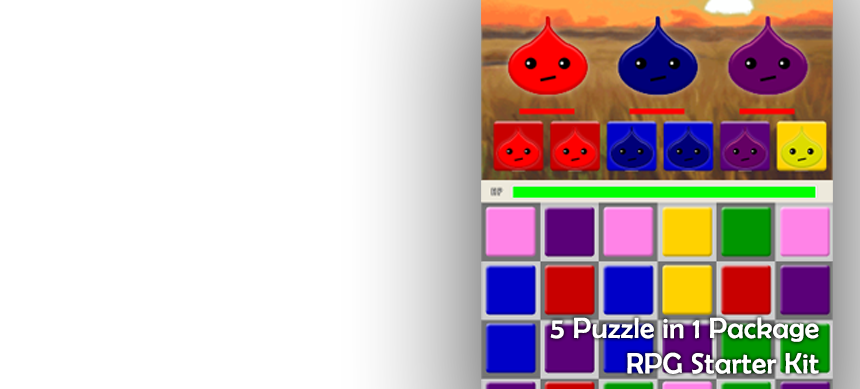
<style>
.page{position:relative;width:860px;height:389px;background:#ffffff}
.page>*{position:absolute;margin:0}
.t1{font:29.5px "BerlinSansFB-Reg";letter-spacing:0.01em;color:#ffffff}
</style>
<div class="page">
<p class="t1" style="left:550px;top:317px;width:269px;height:57px;text-align:right">5 Puzzle in 1 Package<br>RPG Starter Kit</p>
</div>
